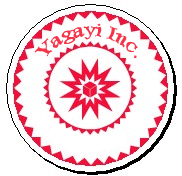
<style>
.page{position:relative;width:182px;height:176px;background:#ffffff}
.page>*{position:absolute;margin:0}
.t1{font:18px "DweeboGothic";color:#f53449}
</style>
<div class="page">
<p class="t1" style="left:34px;top:23px;width:104px;height:35px">Yagayi Inc.</p>
</div>
